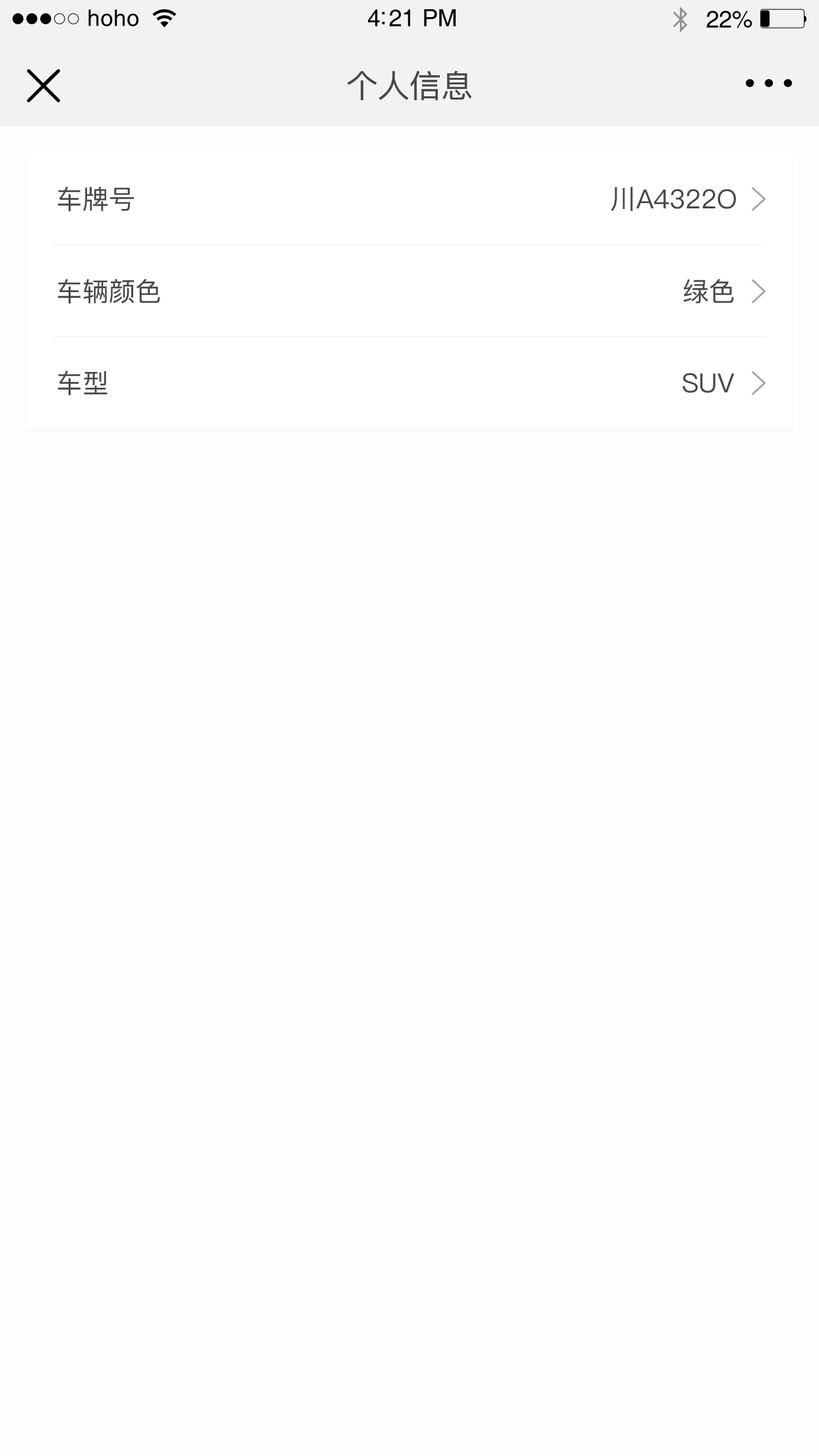
<style>
.page{position:relative;width:819px;height:1456px;background:#fffeff}
.page>*{position:absolute;margin:0}
.t1{font:22.8px "Helvetica";letter-spacing:0.02em;color:#000000}
.t2{font:23.8px "Helvetica";letter-spacing:-0.02em;color:#000000}
.t3{font:31.7px "PingFang-SC-Medium";color:#474747}
.t4{font:26.4px "PingFang-SC-Medium";color:#474747}
</style>
<div class="page">
<p class="t1" style="left:88px;top:9px;width:50px;height:17px">hoho</p>
<p class="t2" style="left:368px;top:9px;width:88px;height:17px">4:21 PM</p>
<p class="t2" style="left:706px;top:11px;width:46px;height:17px">22%</p>
<p class="t3" style="left:347px;top:71px;width:124px;height:29px">个人信息</p>
<p class="t4" style="left:58px;top:187px;width:76px;height:25px">车牌号</p>
<p class="t4" style="left:611px;top:187px;width:125px;height:24px">川A4322O</p>
<p class="t4" style="left:58px;top:279px;width:102px;height:25px">车辆颜色</p>
<p class="t4" style="left:683px;top:279px;width:51px;height:24px">绿色</p>
<p class="t4" style="left:58px;top:371px;width:49px;height:25px">车型</p>
<p class="t4" style="left:682px;top:373px;width:53px;height:20px">SUV</p>
</div>
